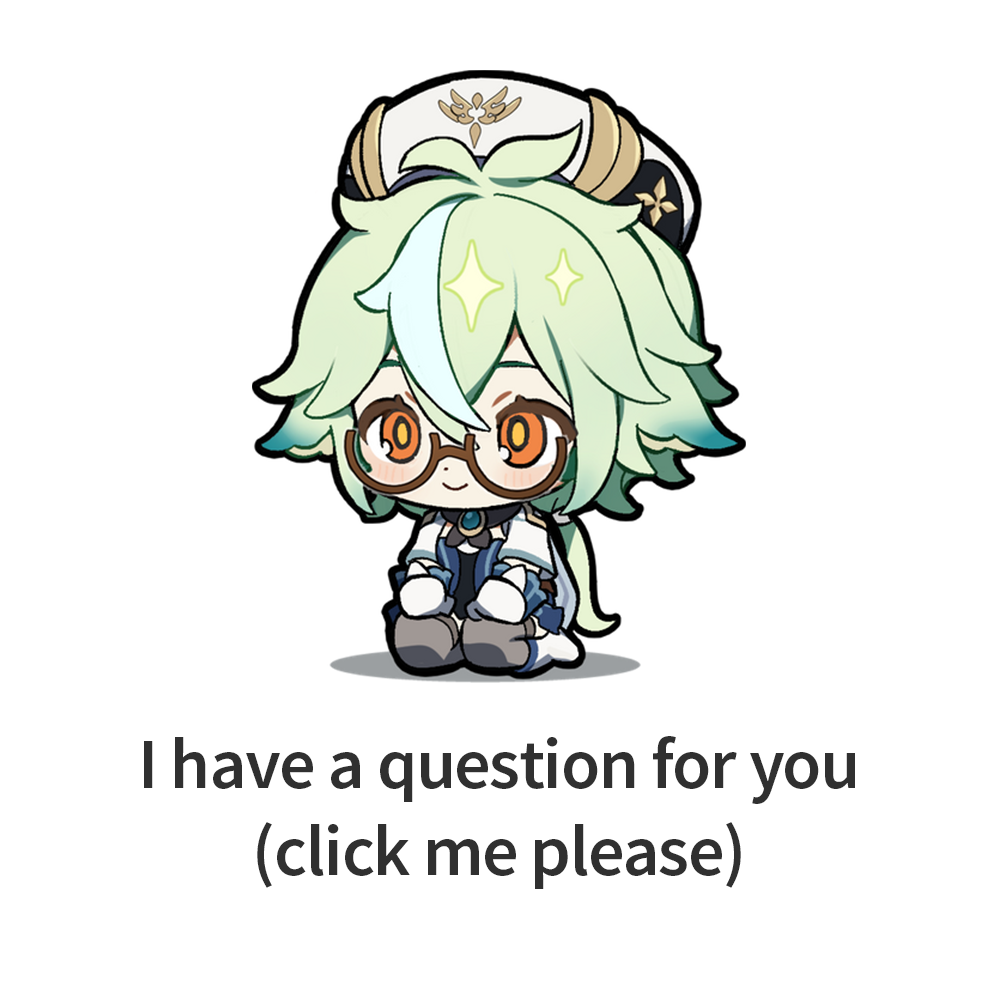
<style>
.page{position:relative;width:1000px;height:1000px;background:#ffffff}
.page>*{position:absolute;margin:0}
.t1{font:72px "SourceSansPro-Semibold";letter-spacing:-0.02em;color:#303030}
</style>
<div class="page">
<p class="t1" style="left:144px;top:736px;width:711px;height:153px;text-align:center">I have a question for you<br>(click me please)</p>
</div>
